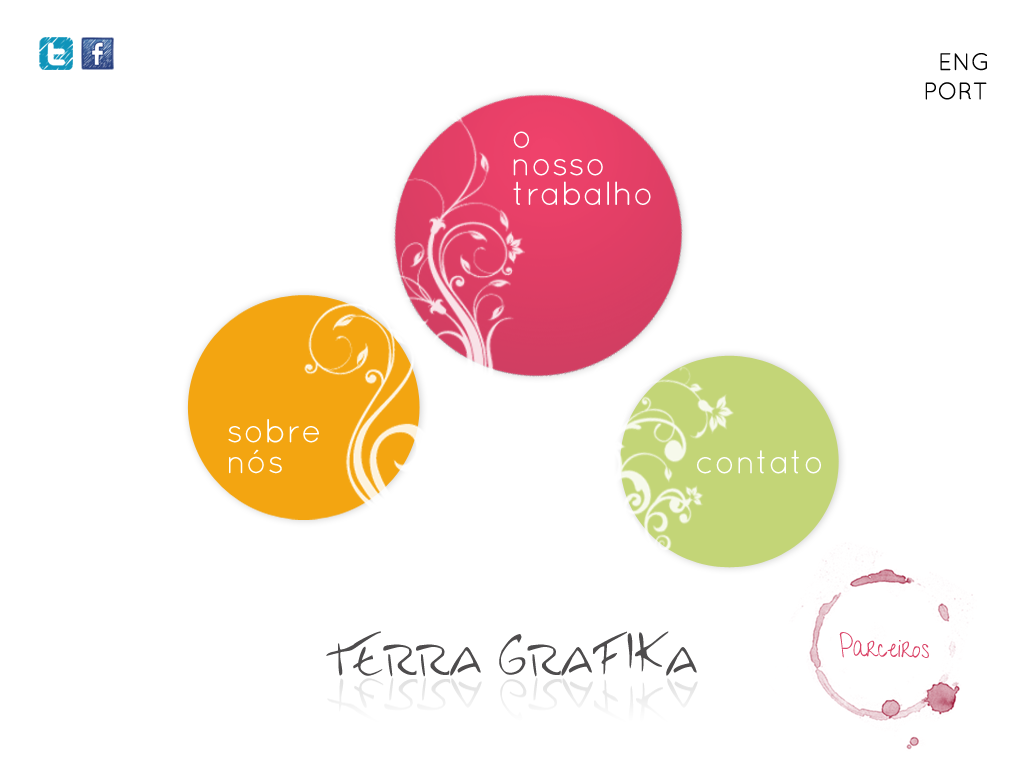
<style>
.page{position:relative;width:1024px;height:768px;background:#ffffff}
.page>*{position:absolute;margin:0}
.t1{font:24px "QuicksandBook-Regular";color:#030303;text-transform:uppercase}
.t2{font:33.5px "QuicksandBook-Regular";color:#ffffff}
.t3{font:67.8px "Inkburrow";color:#4e4c4d;scale:0.71 1}
.t4{font:25px "GiveYouGlory";color:#da4468}
</style>
<div class="page">
<p class="t1" style="left:940px;top:53px;width:47px;height:18px">eng</p>
<p class="t1" style="left:925px;top:82px;width:62px;height:18px">port</p>
<p class="t2" style="left:513px;top:131px;width:16px;height:17px">o</p>
<p class="t2" style="left:513px;top:159px;width:90px;height:17px">nosso</p>
<p class="t2" style="left:513px;top:181px;width:138px;height:24px">trabalho</p>
<p class="t2" style="left:228px;top:419px;width:91px;height:24px">sobre</p>
<p class="t2" style="left:229px;top:449px;width:53px;height:25px">nós</p>
<p class="t2" style="left:697px;top:450px;width:124px;height:24px">contato</p>
<p class="t3" style="left:326px;top:631px;width:371px;height:46px">TERRA GRAFIKA</p>
<p class="t4" style="left:839px;top:632px;width:90px;height:26px;rotate:1deg">Parceiros</p>
</div>
